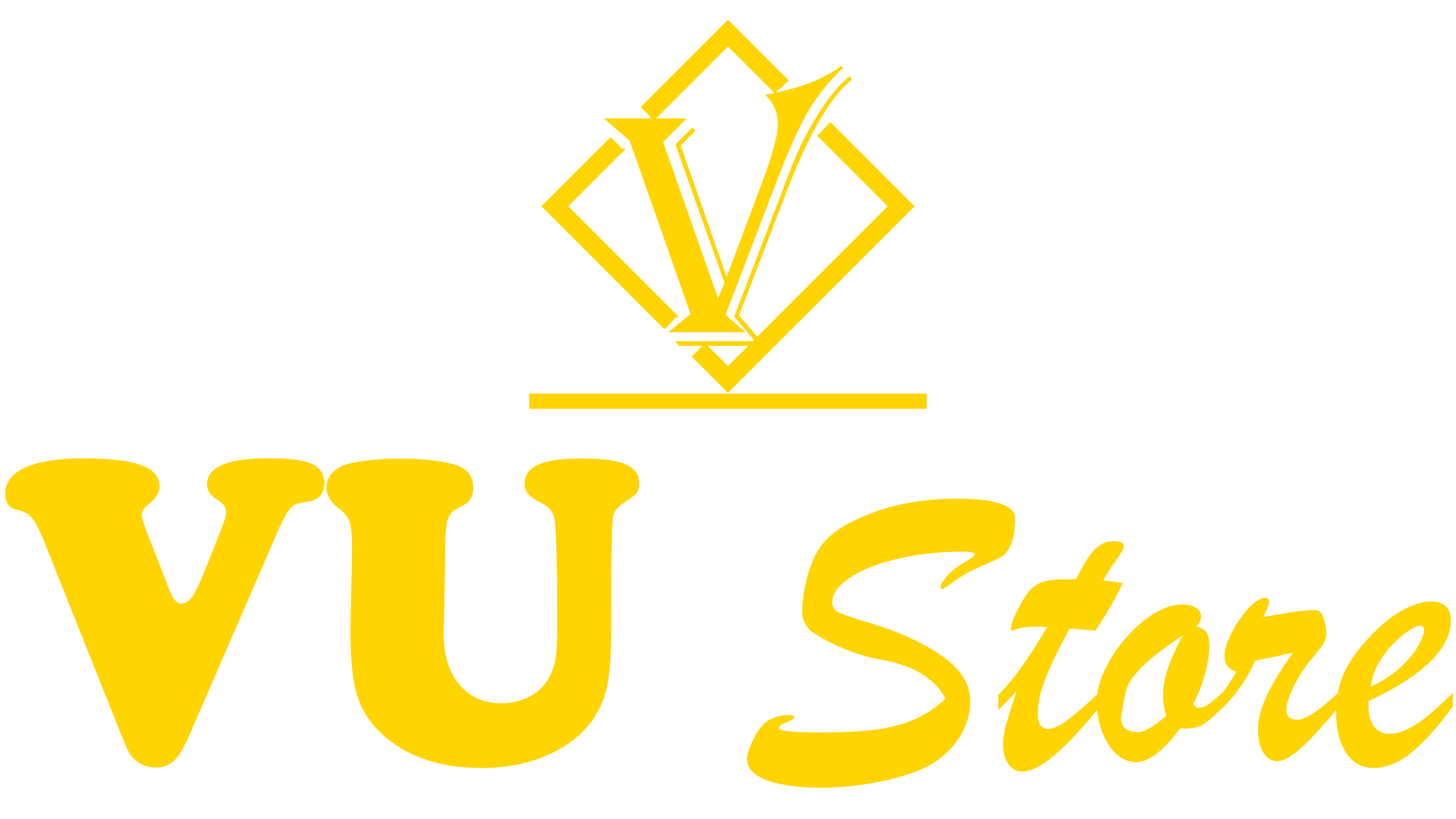
<style>
.page{position:relative;width:1456px;height:819px;background:#ffffff}
.page>*{position:absolute;margin:0}
.t1{font:341px "Algerian";color:#ffd400}
.t2{font:448.7px "BrushScriptMT";color:#ffd400;scale:0.88 1}
.t3{font:448.7px "CooperBlack";color:#ffd400;scale:0.88 1}
</style>
<div class="page">
<p class="t1" style="left:604px;top:65px;width:248px;height:282px">V</p>
<p class="t2" style="left:5px;top:458px;width:1448px;height:330px"><span class="t3">VU </span>Store</p>
</div>
